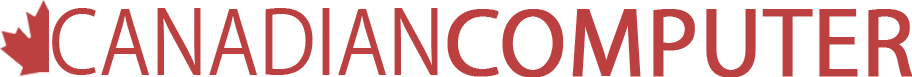
<style>
.page{position:relative;width:912px;height:77px;background:#ffffff}
.page>*{position:absolute;margin:0}
.t1{font:98.2px "MyriadSet-Text";color:#bd4040;scale:0.89 1}
.t2{font:98.2px "MyriadSet-Text";color:#bd4040;font-weight:bold}
</style>
<div class="page">
<p class="t1" style="left:52px;top:8px;width:860px;height:70px">CANADIAN<span class="t2">COMPUTER</span></p>
</div>
